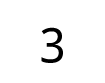
<style>
.page{position:relative;width:105px;height:83px;background:#ffffff}
.page>*{position:absolute;margin:0}
.t1{font:47.9px "DroidSans";color:#000000}
</style>
<div class="page">
<p class="t1" style="left:41px;top:27px;width:22px;height:36px">3</p>
</div>
